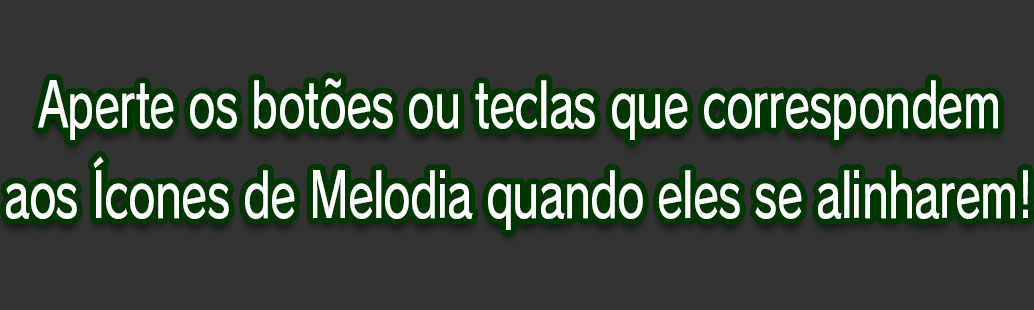
<style>
.page{position:relative;width:1034px;height:310px;background:#333333}
.page>*{position:absolute;margin:0}
.t1{font:61.3px/90.7px "RodinPro-DB";letter-spacing:-0.022em;color:#ffffff;scale:0.71 1}
</style>
<div class="page">
<p class="t1" style="left:6px;top:78px;width:1022px;height:152px;text-align:center">Aperte os botões ou teclas que correspondem<br>aos Ícones de Melodia quando eles se alinharem!</p>
</div>
